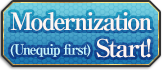
<style>
.page{position:relative;width:162px;height:70px}
.page>*{position:absolute;margin:0}
.t1{font:24px "RyuminPro-ExBold";letter-spacing:-0.08em;color:#fff6f2}
.t2{font:14px "RyuminPro-ExBold";letter-spacing:-0.08em;color:#c7f8ff}
</style>
<div class="page">
<p class="t1" style="left:10px;top:12px;width:142px;height:19px">Modernization</p>
<p class="t1" style="left:96px;top:38px;width:55px;height:20px">Start!</p>
<p class="t2" style="left:10px;top:44px;width:81px;height:13px">(Unequip first)</p>
</div>
